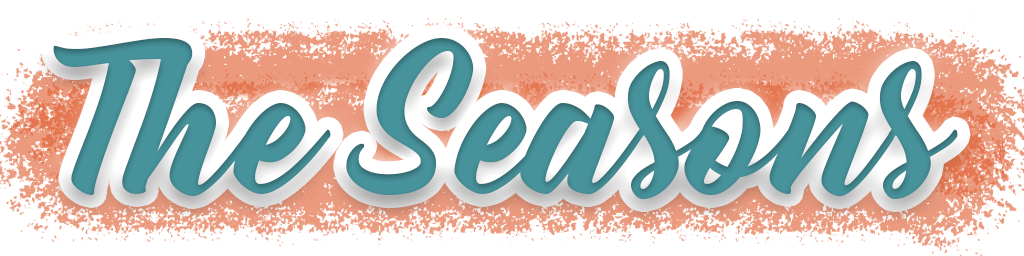
<style>
.page{position:relative;width:1024px;height:256px;background:#ffffff}
.page>*{position:absolute;margin:0}
.t1{font:182px "Bernadette";color:#47939c}
</style>
<div class="page">
<p class="t1" style="left:53px;top:38px;width:905px;height:161px">The Seasons</p>
</div>
